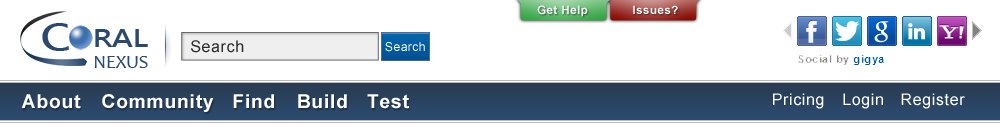
<style>
.page{position:relative;width:1000px;height:129px;background:#ffffff}
.page>*{position:absolute;margin:0}
.t1{font:11.5px "Arial-BoldMT";letter-spacing:0.04em;color:#ffffff}
.t2{font:36px "MicrosoftJhengHeiBold";letter-spacing:-0.02em;color:#294970;scale:1.24 1}
.t3{font:24px "MicrosoftJhengHeiBold";letter-spacing:-0.02em;color:#294970;scale:1.24 1}
.t4{font:16px "ArialMT";letter-spacing:0.04em;color:#2b2b2b}
.t5{font:12px "ArialMT";letter-spacing:0.04em;color:#ffffff}
.t6{font:18.7px "Candara";color:#294970}
.t7{font:19.3px "Arial-BoldMT";letter-spacing:0.04em;color:#ffffff}
.t8{font:16px "ArialMT";letter-spacing:0.04em;color:#ffffff}
</style>
<div class="page">
<p class="t1" style="left:537px;top:5px;width:51px;height:12px">Get Help</p>
<p class="t1" style="left:633px;top:5px;width:45px;height:9px">Issues?</p>
<p class="t2" style="left:42px;top:23px;width:27px;height:28px">C</p>
<p class="t3" style="left:95px;top:29px;width:53px;height:18px">RAL</p>
<p class="t4" style="left:191px;top:40px;width:53px;height:13px">Search</p>
<p class="t5" style="left:385px;top:42px;width:40px;height:10px">Search</p>
<p class="t6" style="left:94px;top:56px;width:54px;height:12px">NEXUS</p>
<p class="t7" style="left:21px;top:94px;width:60px;height:15px">About</p>
<p class="t7" style="left:102px;top:94px;width:112px;height:18px">Community</p>
<p class="t7" style="left:233px;top:94px;width:41px;height:15px">Find</p>
<p class="t7" style="left:298px;top:94px;width:49px;height:15px">Build</p>
<p class="t7" style="left:367px;top:94px;width:42px;height:15px">Test</p>
<p class="t8" style="left:773px;top:93px;width:51px;height:16px">Pricing</p>
<p class="t8" style="left:843px;top:93px;width:40px;height:16px">Login</p>
<p class="t8" style="left:901px;top:93px;width:64px;height:16px">Register</p>
</div>
